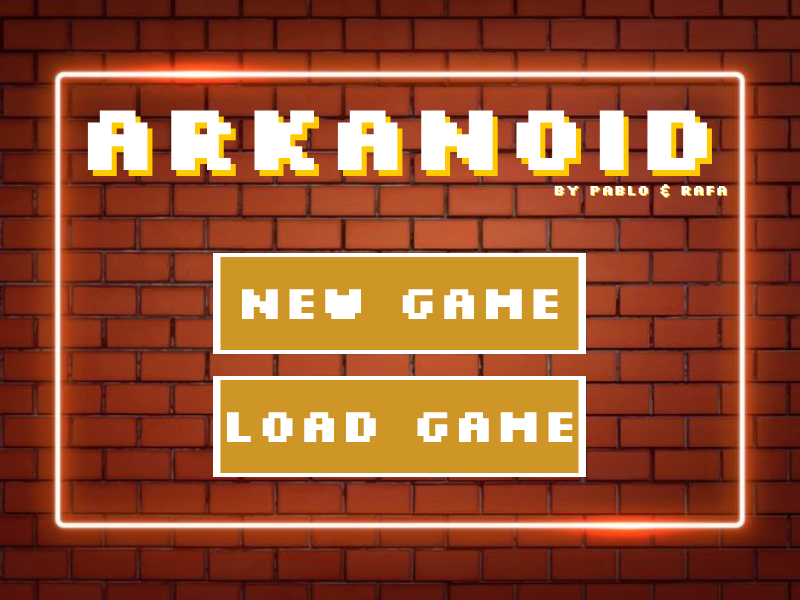
<style>
.page{position:relative;width:800px;height:600px}
.page>*{position:absolute;margin:0}
.t1{font:100px "Silkscreen-Bold";color:#ffffff}
.t2{font:15px "Silkscreen-Bold";color:#ffffff}
.t3{font:15px "Silkscreen-Bold"}
.t4{font:50px "Silkscreen-Bold";color:#ffffff}
</style>
<div class="page">
<p class="t1" style="left:87px;top:110px;width:620px;height:60px">ARKANOID</p>
<p class="t1" style="left:92px;top:116px;width:620px;height:60px">ARKANOID</p>
<p class="t2" style="left:554px;top:184px;width:173px;height:13px">by pABLO &amp; RAFA</p>
<p class="t3" style="left:555px;top:185px;width:173px;height:13px">by pABLO &amp; RAFA</p>
<p class="t4" style="left:241px;top:289px;width:317px;height:30px">NEW GAME</p>
<p class="t4" style="left:226px;top:412px;width:347px;height:30px">LOAD GAME</p>
</div>
